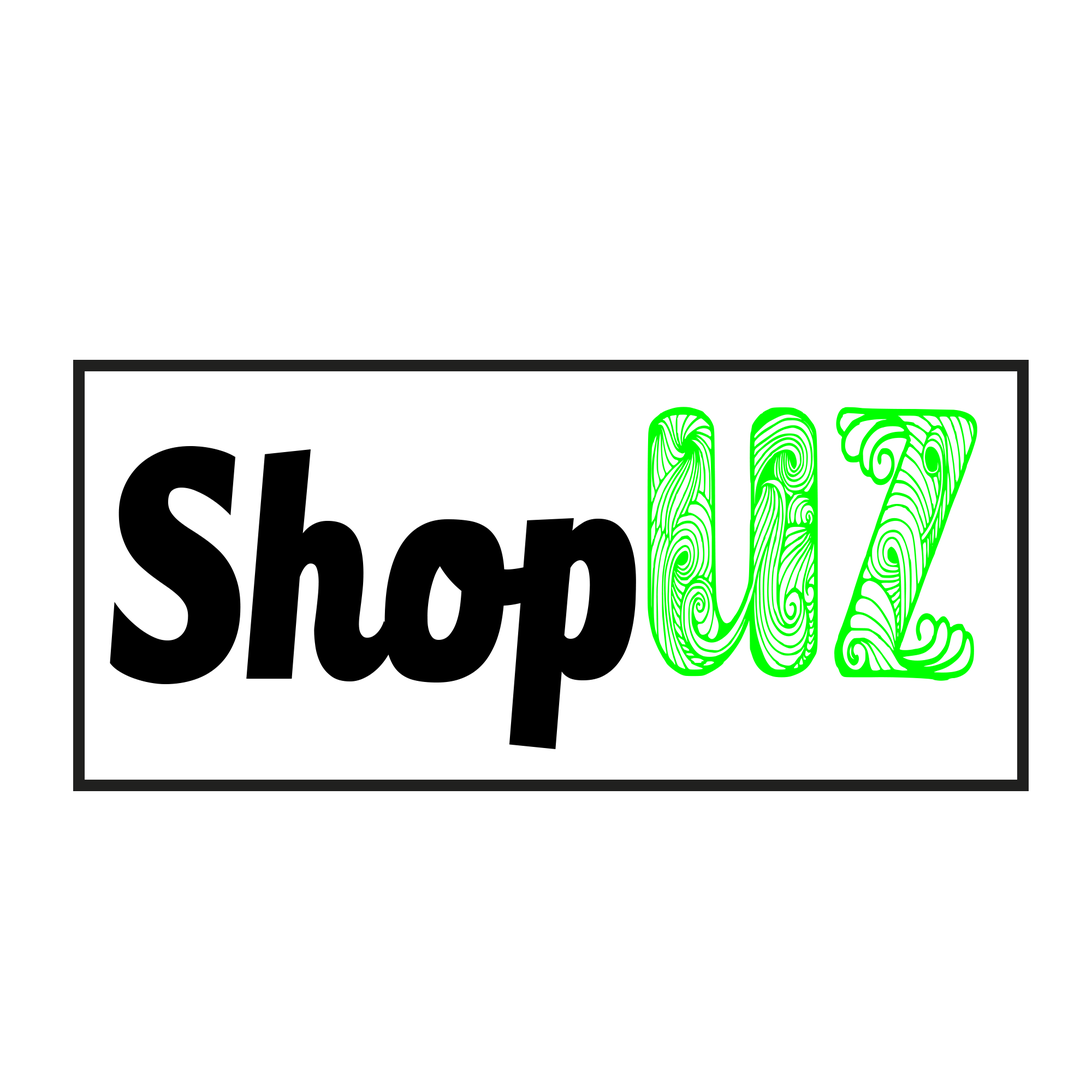
<style>
.page{position:relative;width:1092px;height:1092px;background:#ffffff}
.page>*{position:absolute;margin:0}
.t1{font:298px "BullettoKilla";letter-spacing:0.01em;color:#000000;scale:0.78 1}
.t2{font:414.4px "Labrint-Demo";letter-spacing:0.01em;color:#00ff00;scale:0.56 1}
</style>
<div class="page">
<p class="t1" style="left:110px;top:407px;width:867px;height:342px">Shop<span class="t2">Uz</span></p>
</div>
